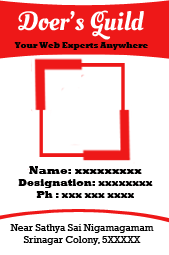
<style>
.page{position:relative;width:169px;height:255px;background:#ffffff}
.page>*{position:absolute;margin:0}
.t1{font:26px "OleoScriptSwashCaps-Regular";color:#ffffff}
.t2{font:8px "Rockwell-ExtraBold";color:#010000}
.t3{font:10px "Rockwell-ExtraBold";color:#010000}
.t4{font:11px "Rockwell-ExtraBold";color:#010000}
.t5{font:10px "Rockwell";color:#000000}
</style>
<div class="page">
<p class="t1" style="left:18px;top:10px;width:126px;height:30px">Doer’s Guild</p>
<p class="t2" style="left:14px;top:42px;width:134px;height:8px">Your Web Experts Anywhere</p>
<p class="t3" style="left:18px;top:166px;width:135px;height:32px;text-align:center"><span class="t4">Name: xxxxxxxxx<br></span>Designation: xxxxxxxx<br>Ph : xxx xxx xxxx</p>
<p class="t5" style="left:10px;top:224px;width:144px;height:21px;text-align:center">Near Sathya Sai Nigamagamam<br>Srinagar Colony, 5XXXXX</p>
</div>
